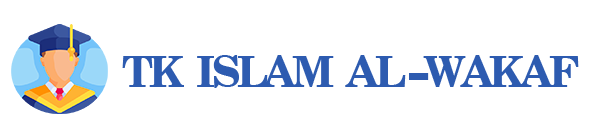
<style>
.page{position:relative;width:600px;height:137px;background:#ffffff}
.page>*{position:absolute;margin:0}
.t1{font:43px "CenturySchlbkCyrillicBT-Bold";letter-spacing:-0.1em;color:#2d5bb0}
.t2{font:43px "LatinWide";letter-spacing:-0.1em;color:#2d5bb0}
</style>
<div class="page">
<p class="t1" style="left:122px;top:55px;width:457px;height:33px">TK  ISLAM  AL <span class="t2">-</span>WAKAF</p>
</div>
